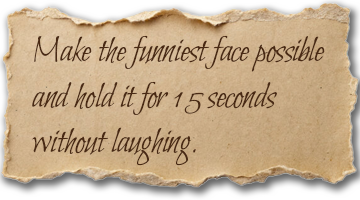
<style>
.page{position:relative;width:360px;height:200px}
.page>*{position:absolute;margin:0}
.t1{font:38px "Bilbo-Regular";letter-spacing:-0.02em;color:#492913}
</style>
<div class="page">
<p class="t1" style="left:32px;top:35px;width:293px;height:131px">Make the funniest face possible <br>and hold it for 15 seconds <br>without laughing.</p>
</div>
